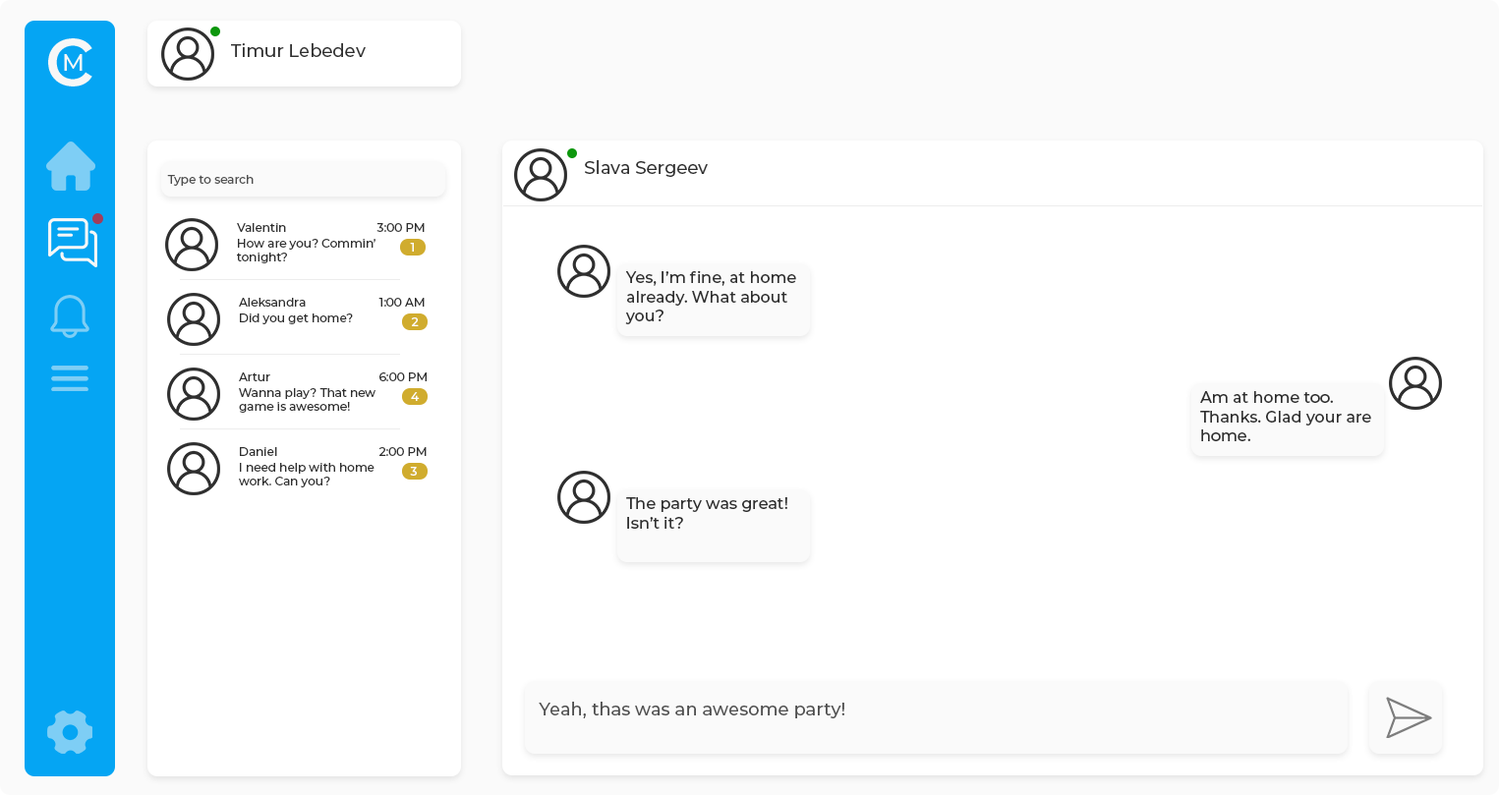
<style>
.page{position:relative;width:1499px;height:795px;background:#ffffff}
.page>*{position:absolute;margin:0}
.t1{font:17.7px "Montserrat-Medium";color:#2f2f2f}
.t2{font:11.8px "Montserrat-Medium";color:#4e4e4e}
.t3{font:11.8px "Montserrat-Medium";color:#2f2f2f}
.t4{font:11.8px "Montserrat-Medium";color:#ffffff}
.t5{font:15.7px "Montserrat-Medium";color:#2f2f2f}
.t6{font:17.7px "Montserrat-Medium";color:#4e4e4e}
</style>
<div class="page">
<p class="t1" style="left:231px;top:43px;width:135px;height:14px">Timur Lebedev</p>
<p class="t1" style="left:585px;top:160px;width:123px;height:17px">Slava Sergeev</p>
<p class="t2" style="left:167px;top:175px;width:87px;height:11px">Type to search</p>
<p class="t3" style="left:237px;top:223px;width:49px;height:9px">Valentin</p>
<p class="t3" style="left:377px;top:223px;width:48px;height:9px">3:00 PM</p>
<p class="t3" style="left:237px;top:239px;width:139px;height:24px">How are you? Commin’<br>tonight?</p>
<p class="t4" style="left:410px;top:243px;width:4px;height:9px">1</p>
<p class="t5" style="left:625px;top:270px;width:171px;height:54px">Yes, I’m fine, at home<br>already. What about<br>you?</p>
<p class="t3" style="left:239px;top:298px;width:67px;height:9px">Aleksandra</p>
<p class="t3" style="left:379px;top:298px;width:46px;height:9px">1:00 AM</p>
<p class="t3" style="left:240px;top:314px;width:113px;height:10px">Did you get home?</p>
<p class="t4" style="left:411px;top:318px;width:8px;height:8px">2</p>
<p class="t3" style="left:239px;top:373px;width:31px;height:8px">Artur</p>
<p class="t3" style="left:379px;top:373px;width:48px;height:8px">6:00 PM</p>
<p class="t3" style="left:239px;top:388px;width:137px;height:25px">Wanna play? That new<br>game is awesome!</p>
<p class="t4" style="left:411px;top:392px;width:9px;height:9px">4</p>
<p class="t5" style="left:1200px;top:391px;width:171px;height:50px">Am at home too. <br>Thanks. Glad your are<br>home.</p>
<p class="t3" style="left:240px;top:447px;width:37px;height:9px">Daniel</p>
<p class="t3" style="left:379px;top:447px;width:48px;height:9px">2:00 PM</p>
<p class="t3" style="left:239px;top:463px;width:136px;height:25px">I need help with home<br>work. Can you?</p>
<p class="t4" style="left:410px;top:467px;width:7px;height:9px">3</p>
<p class="t5" style="left:626px;top:497px;width:161px;height:32px">The party was great!<br>Isn’t it?</p>
<p class="t6" style="left:539px;top:702px;width:306px;height:17px">Yeah, thas was an awesome party!</p>
</div>
